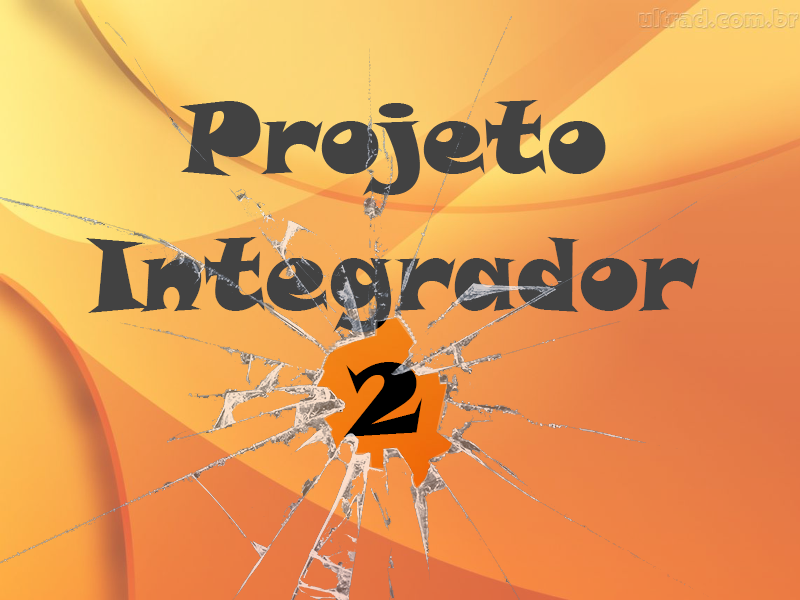
<style>
.page{position:relative;width:800px;height:600px}
.page>*{position:absolute;margin:0}
.t1{font:100px "SnapITC-Regular";color:#424242}
.t2{font:100px "SnapITC-Regular";color:#000000}
</style>
<div class="page">
<p class="t1" style="left:85px;top:237px;width:615px;height:96px">Integrador</p>
<p class="t2" style="left:343px;top:362px;width:79px;height:75px">2</p>
</div>
